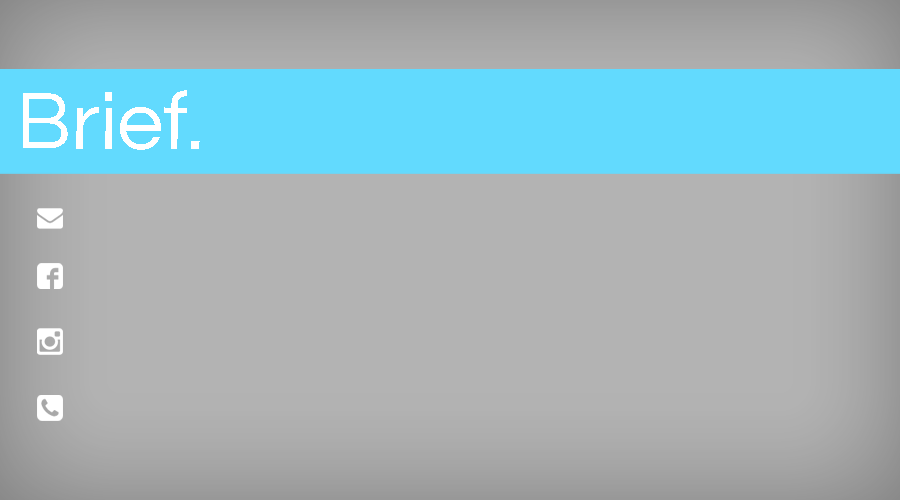
<style>
.page{position:relative;width:900px;height:500px;background:#b3b3b3}
.page>*{position:absolute;margin:0}
.t1{font:83.2px "Questrial-Regular";color:#ffffff}
</style>
<div class="page">
<p class="t1" style="left:23px;top:90px;width:177px;height:60px">Brief.</p>
</div>
